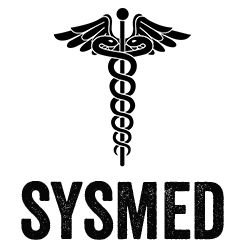
<style>
.page{position:relative;width:250px;height:250px;background:#ffffff}
.page>*{position:absolute;margin:0}
.t1{font:78.9px "Veneer";color:#070707}
</style>
<div class="page">
<p class="t1" style="left:21px;top:181px;width:203px;height:59px">sysmed</p>
</div>
